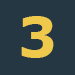
<style>
.page{position:relative;width:75px;height:75px;background:#253742}
.page>*{position:absolute;margin:0}
.t1{font:55px "Verdana-Bold";color:#efc94c}
</style>
<div class="page">
<p class="t1" style="left:21px;top:16px;width:33px;height:42px">3</p>
</div>
